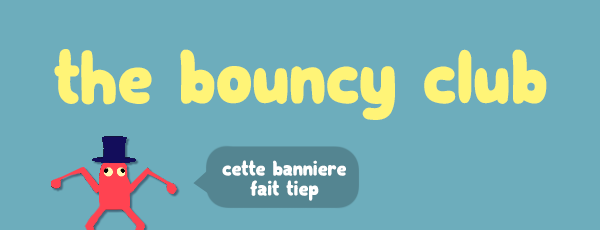
<style>
.page{position:relative;width:600px;height:230px;background:#6dadbc}
.page>*{position:absolute;margin:0}
.t1{font:81.4px "Subscribe-Regular";color:#fff477}
.t2{font:22.4px/20px "Subscribe-Regular";color:#ffffff}
</style>
<div class="page">
<p class="t1" style="left:54px;top:49px;width:493px;height:71px">the bouncy club</p>
<p class="t2" style="left:222px;top:160px;width:124px;height:41px;text-align:center">cette banniere <br>fait tiep</p>
</div>
